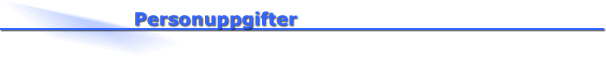
<style>
.page{position:relative;width:606px;height:57px;background:#ffffff}
.page>*{position:absolute;margin:0}
.t1{font:18px "Verdana-Bold";color:#3366ff}
</style>
<div class="page">
<p class="t1" style="left:135px;top:11px;width:162px;height:18px">Personuppgifter</p>
</div>
